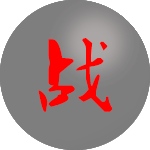
<style>
.page{position:relative;width:150px;height:150px;background:#7f7e7e}
.page>*{position:absolute;margin:0}
.t1{font:80px "2.0-";color:#fe0000}
</style>
<div class="page">
<p class="t1" style="left:38px;top:38px;width:75px;height:74px">战</p>
</div>
